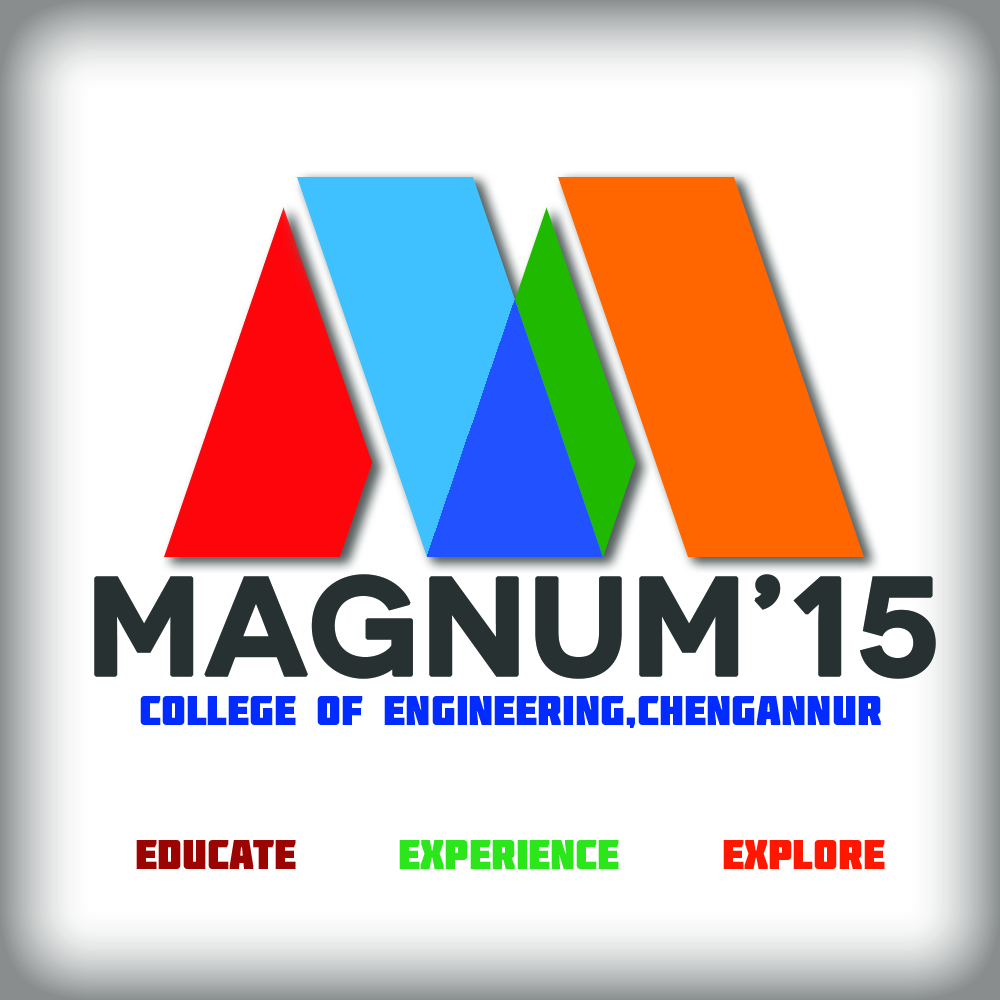
<style>
.page{position:relative;width:1000px;height:1000px;background:#ffffff}
.page>*{position:absolute;margin:0}
.t1{font:139.3px "Novecentosanswide-DemiBold";color:#283132;text-transform:uppercase;font-weight:bold}
.t2{font:41.7px "Molot";color:#022bff}
.t3{font:41.7px "Molot";color:#2ae61a}
.t4{font:41.7px "Molot";color:#9b0400}
.t5{font:41.7px "Molot";color:#ff1700}
</style>
<div class="page">
<p class="t1" style="left:94px;top:574px;width:842px;height:105px">magnum’15</p>
<p class="t2" style="left:140px;top:696px;width:741px;height:32px">COLLEGE OF ENGINEERING,CHENGANNUR</p>
<p class="t3" style="left:136px;top:840px;width:749px;height:29px"><span class="t4">educate     </span>experience     <span class="t5">explore</span></p>
</div>
